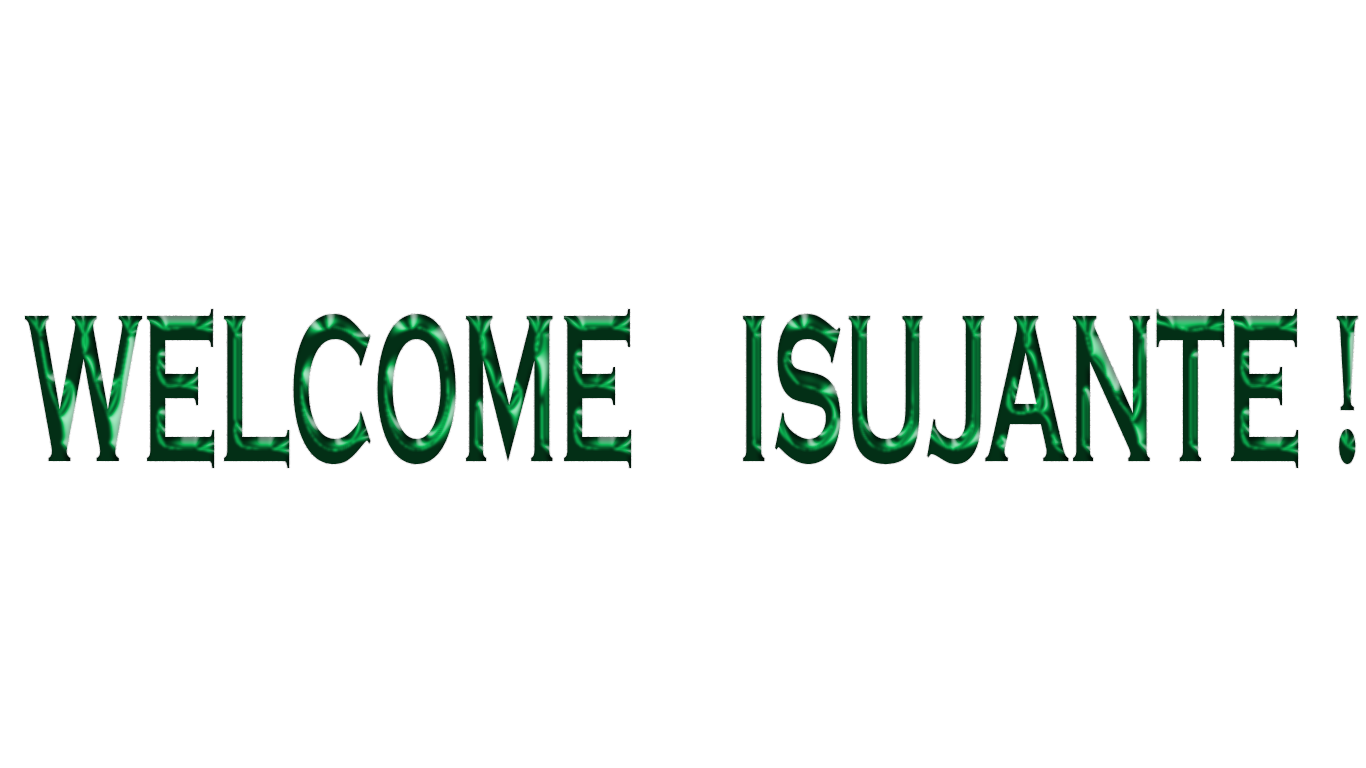
<style>
.page{position:relative;width:1366px;height:768px;background:#ffffff}
.page>*{position:absolute;margin:0}
.t1{font:216.9px "CopperplateGothic-Bold";scale:0.47 1}
</style>
<div class="page">
<p class="t1" style="left:25px;top:309px;width:1333px;height:159px">WELCOME    ISUJANTE !</p>
</div>
